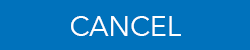
<style>
.page{position:relative;width:250px;height:50px;background:#0072bc}
.page>*{position:absolute;margin:0}
.t1{font:28px "AvenirNext-Regular";color:#ffffff}
</style>
<div class="page">
<p class="t1" style="left:71px;top:16px;width:110px;height:20px">CANCEL</p>
</div>
